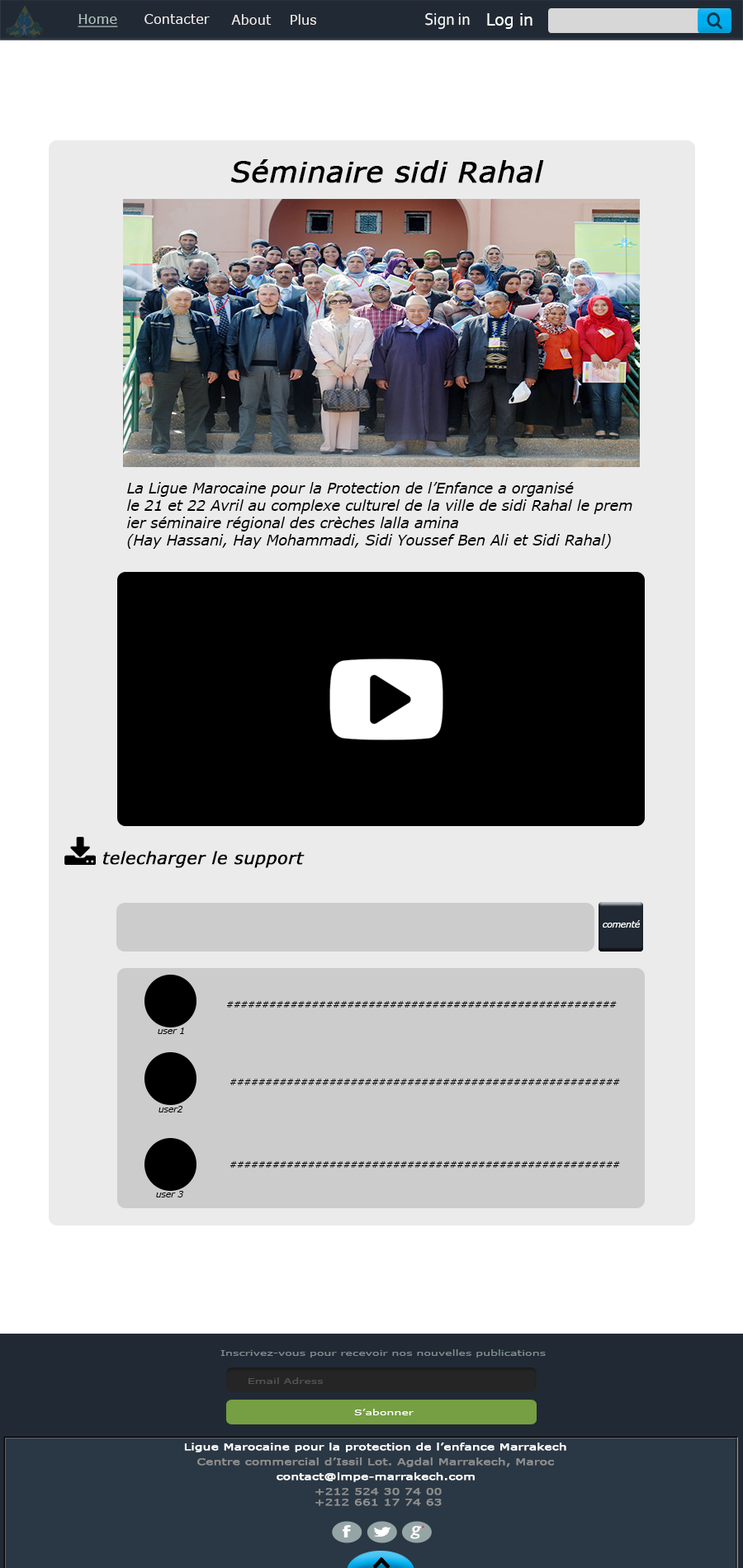
<style>
.page{position:relative;width:743px;height:1568px;background:#ffffff}
.page>*{position:absolute;margin:0}
.t1{font:14.2px "Verdana";color:#afc0bd;text-decoration:underline;scale:0.94 1}
.t2{font:14.2px "Verdana";color:#f2eaea;scale:0.94 1}
.t3{font:17.3px "Corbel";color:#fdfdfd;scale:0.94 1}
.t4{font:16.4px "Verdana";color:#ffffff;scale:0.94 1}
.t5{font:28.9px "Verdana-Italic";color:#000000;font-weight:bold}
.t6{font:14.4px "Verdana-Italic";color:#000000}
.t7{font:17px "Verdana-Italic";color:#000000;font-weight:bold}
.t8{font:8.7px "Verdana-Italic";color:#ffffff}
.t9{font:8.7px "Verdana-Italic";color:#090909}
.t10{font:8.5px "Verdana";color:#7d8e8e;scale:1.38 1}
.t11{font:8.5px "Verdana";color:#545454;scale:1.38 1}
.t12{font:8.5px "Verdana";color:#ffffff;scale:1.38 1}
.t13{font:9px "Verdana";color:#ffffff;font-weight:bold;scale:1.37 1}
.t14{font:9px "Verdana";color:#8e8e8e;font-weight:bold;scale:1.37 1}
.t15{font:23.3px "Vijaya";color:#ffffff;font-weight:bold}
.t16{font:5.8px "Vijaya";color:#e22727;font-weight:bold}
</style>
<div class="page">
<p class="t1" style="left:78px;top:14px;width:40px;height:13px">Home</p>
<p class="t2" style="left:144px;top:14px;width:66px;height:10px">Contacter</p>
<p class="t2" style="left:231px;top:14px;width:41px;height:11px">About</p>
<p class="t2" style="left:290px;top:14px;width:26px;height:11px">Plus</p>
<p class="t3" style="left:425px;top:12px;width:45px;height:18px">Sign in</p>
<p class="t4" style="left:487px;top:13px;width:45px;height:16px">Log in</p>
<p class="t5" style="left:230px;top:159px;width:314px;height:24px">Séminaire sidi Rahal</p>
<p class="t6" style="left:127px;top:482px;width:505px;height:67px">La Ligue Marocaine pour la Protection de l’Enfance a organisé <br>le 21 et 22 Avril au complexe culturel de la ville de sidi Rahal le prem<br>ier séminaire régional des crèches lalla amina <br>(Hay Hassani, Hay Mohammadi, Sidi Youssef Ben Ali et Sidi Rahal)</p>
<p class="t7" style="left:103px;top:851px;width:202px;height:17px">telecharger le support</p>
<p class="t8" style="left:602px;top:920px;width:38px;height:8px">comenté</p>
<p class="t9" style="left:226px;top:1001px;width:390px;height:7px">#######################################################</p>
<p class="t9" style="left:158px;top:1027px;width:26px;height:7px">user 1</p>
<p class="t9" style="left:229px;top:1079px;width:391px;height:6px">#######################################################</p>
<p class="t9" style="left:158px;top:1106px;width:25px;height:6px">user2</p>
<p class="t9" style="left:229px;top:1161px;width:391px;height:7px">#######################################################</p>
<p class="t9" style="left:156px;top:1191px;width:28px;height:6px">user 3</p>
<p class="t10" style="left:220px;top:1349px;width:325px;height:9px">Inscrivez-vous pour recevoir nos nouvelles publications</p>
<p class="t11" style="left:248px;top:1377px;width:76px;height:7px">Email Adress</p>
<p class="t12" style="left:354px;top:1409px;width:59px;height:6px">S’abonner</p>
<p class="t13" style="left:184px;top:1443px;width:382px;height:9px">Ligue Marocaine pour la protection de l’enfance Marrakech</p>
<p class="t14" style="left:197px;top:1457px;width:357px;height:10px">Centre commercial d’Issil Lot. Agdal Marrakech, Maroc</p>
<p class="t13" style="left:276px;top:1472px;width:199px;height:10px">contact@lmpe-marrakech.com</p>
<p class="t14" style="left:315px;top:1488px;width:127px;height:18px">+212 524 30 74 00  <br>+212 661 17 74 63</p>
<p class="t15" style="left:410px;top:1525px;width:14px;height:14px">g<span class="t16">+</span></p>
</div>
